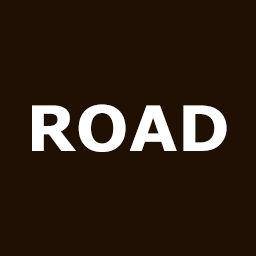
<style>
.page{position:relative;width:256px;height:256px;background:#201003}
.page>*{position:absolute;margin:0}
.t1{font:62.5px "Verdana-Bold";letter-spacing:0.005em;color:#ffffff}
</style>
<div class="page">
<p class="t1" style="left:32px;top:104px;width:195px;height:48px">ROAD</p>
</div>
